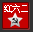
<style>
.page{position:relative;width:33px;height:32px;background:#c50000}
.page>*{position:absolute;margin:0}
.t1{font:10.4px "SimSun";letter-spacing:-0.25em;color:#ffffff}
</style>
<div class="page">
<p class="t1" style="left:4px;top:4px;width:24px;height:9px">红六二</p>
</div>
